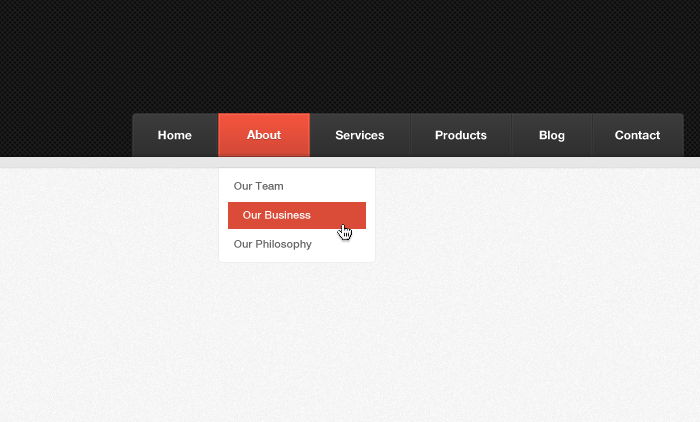
<style>
.page{position:relative;width:700px;height:422px}
.page>*{position:absolute;margin:0}
.t1{font:12px "HelveticaNeue-Bold";color:#ffffff}
.t2{font:11px "HelveticaNeue-Medium";color:#666666}
.t3{font:11px "HelveticaNeue-Medium";color:#ffffff}
</style>
<div class="page">
<p class="t1" style="left:158px;top:130px;width:34px;height:10px">Home</p>
<p class="t1" style="left:246px;top:130px;width:35px;height:9px">About</p>
<p class="t1" style="left:335px;top:130px;width:49px;height:10px">Services</p>
<p class="t1" style="left:435px;top:130px;width:52px;height:10px">Products</p>
<p class="t1" style="left:539px;top:130px;width:26px;height:12px">Blog</p>
<p class="t1" style="left:615px;top:130px;width:45px;height:10px">Contact</p>
<p class="t2" style="left:234px;top:182px;width:49px;height:8px">Our Team</p>
<p class="t3" style="left:243px;top:211px;width:68px;height:8px">Our Business</p>
<p class="t2" style="left:234px;top:240px;width:78px;height:10px">Our Philosophy</p>
</div>
